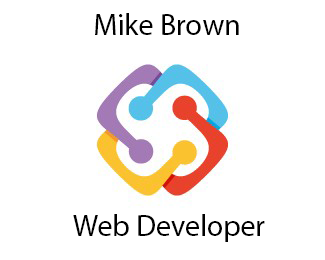
<style>
.page{position:relative;width:325px;height:260px;background:#ffffff}
.page>*{position:absolute;margin:0}
.t1{font:30px "MyriadPro-Regular";color:#000000}
</style>
<div class="page">
<p class="t1" style="left:95px;top:13px;width:144px;height:22px">Mike Brown</p>
<p class="t1" style="left:73px;top:214px;width:192px;height:28px">Web Developer</p>
</div>
